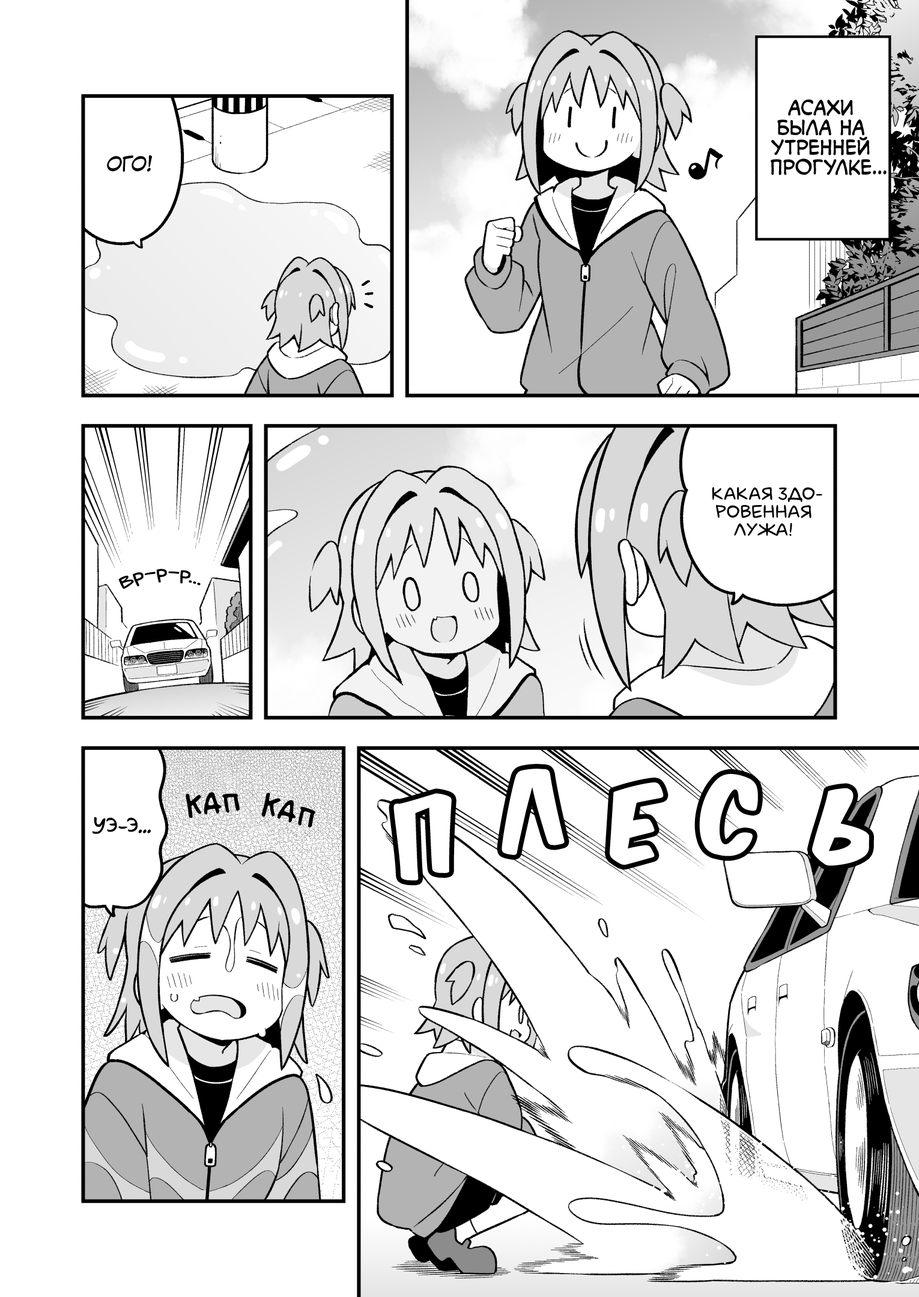
<style>
.page{position:relative;width:919px;height:1297px;background:#ffffff}
.page>*{position:absolute;margin:0}
.t1{font:19.8px "v_CCMonologous";color:#000000;text-transform:uppercase}
.t2{font:19.8px "KuraiVoice2";color:#000000;text-transform:uppercase}
.t3{font:18px "laCartoonerie";color:#000000;text-transform:uppercase}
.t4{font:21.6px "v_Augie";color:#000000}
.t5{font:90.1px "KomikaTitle-AxisRUS-LAT";color:#ffffff}
.t6{font:36px "v_BillyTheFlyingRobotBBLC";color:#000000;text-transform:uppercase}
.t7{font:19.8px "AkbarPlain";color:#000000}
</style>
<div class="page">
<p class="t1" style="left:771px;top:99px;width:116px;height:76px;text-align:center">Асахи<br>была на<br>утренней<br>прогулке...</p>
<p class="t2" style="left:107px;top:155px;width:45px;height:17px">Ого!</p>
<p class="t3" style="left:712px;top:487px;width:110px;height:49px;text-align:center">Какая здо-<br>ровенная<br>лужа!</p>
<p class="t4" style="left:118px;top:569px;width:83px;height:20px;rotate:-3deg">вр-р-р...</p>
<p class="t5" style="left:502px;top:769px;width:63px;height:86px;rotate:-13deg">л</p>
<p class="t5" style="left:699px;top:774px;width:59px;height:83px;rotate:-5deg">с</p>
<p class="t5" style="left:610px;top:783px;width:54px;height:83px;rotate:-4deg">е</p>
<p class="t6" style="left:186px;top:792px;width:54px;height:27px;rotate:-4deg">кап</p>
<p class="t6" style="left:261px;top:793px;width:54px;height:35px;rotate:18deg">кап</p>
<p class="t5" style="left:393px;top:794px;width:59px;height:87px;rotate:-14deg">п</p>
<p class="t5" style="left:812px;top:788px;width:57px;height:78px;rotate:11deg">ь</p>
<p class="t7" style="left:92px;top:817px;width:59px;height:17px">Уэ-э...</p>
</div>
